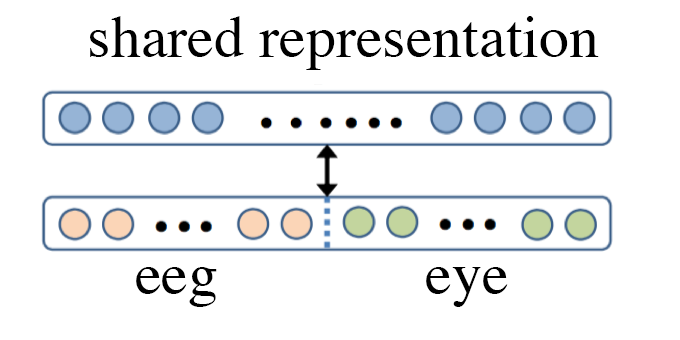
<style>
.page{position:relative;width:680px;height:340px;background:#ffffff}
.page>*{position:absolute;margin:0}
.t1{font:60px "Times-Roman";color:#000000}
</style>
<div class="page">
<p class="t1" style="left:90px;top:16px;width:509px;height:54px">shared representation</p>
<p class="t1" style="left:136px;top:267px;width:81px;height:40px">eeg</p>
<p class="t1" style="left:426px;top:267px;width:82px;height:40px">eye</p>
</div>
